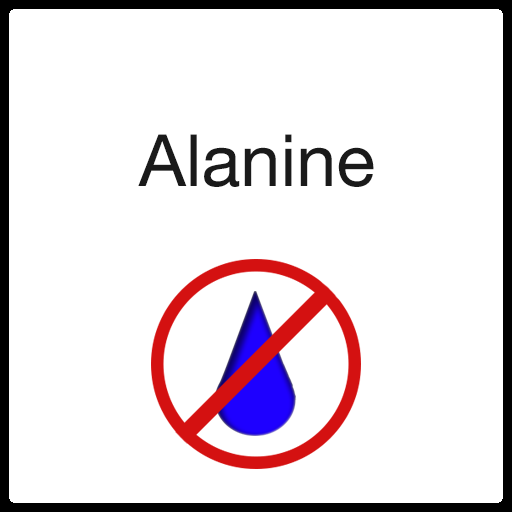
<style>
.page{position:relative;width:512px;height:512px;background:#ffffff}
.page>*{position:absolute;margin:0}
.t1{font:72px "HelveticaNeueLTPro-Roman";color:#1a1a1a}
</style>
<div class="page">
<p class="t1" style="left:138px;top:134px;width:236px;height:53px">Alanine</p>
</div>
